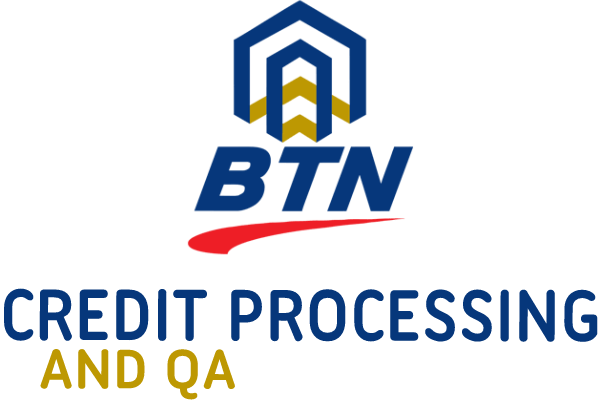
<style>
.page{position:relative;width:600px;height:400px;background:#ffffff}
.page>*{position:absolute;margin:0}
.t1{font:78.9px "UbuntuTitling-Bold";color:#06377b;scale:0.89 1}
.t2{font:60.3px "UbuntuTitling-Bold";color:#bd9802}
</style>
<div class="page">
<p class="t1" style="left:4px;top:288px;width:594px;height:54px">CREDIT PROCESSING</p>
<p class="t2" style="left:40px;top:349px;width:195px;height:51px">AND QA</p>
</div>
